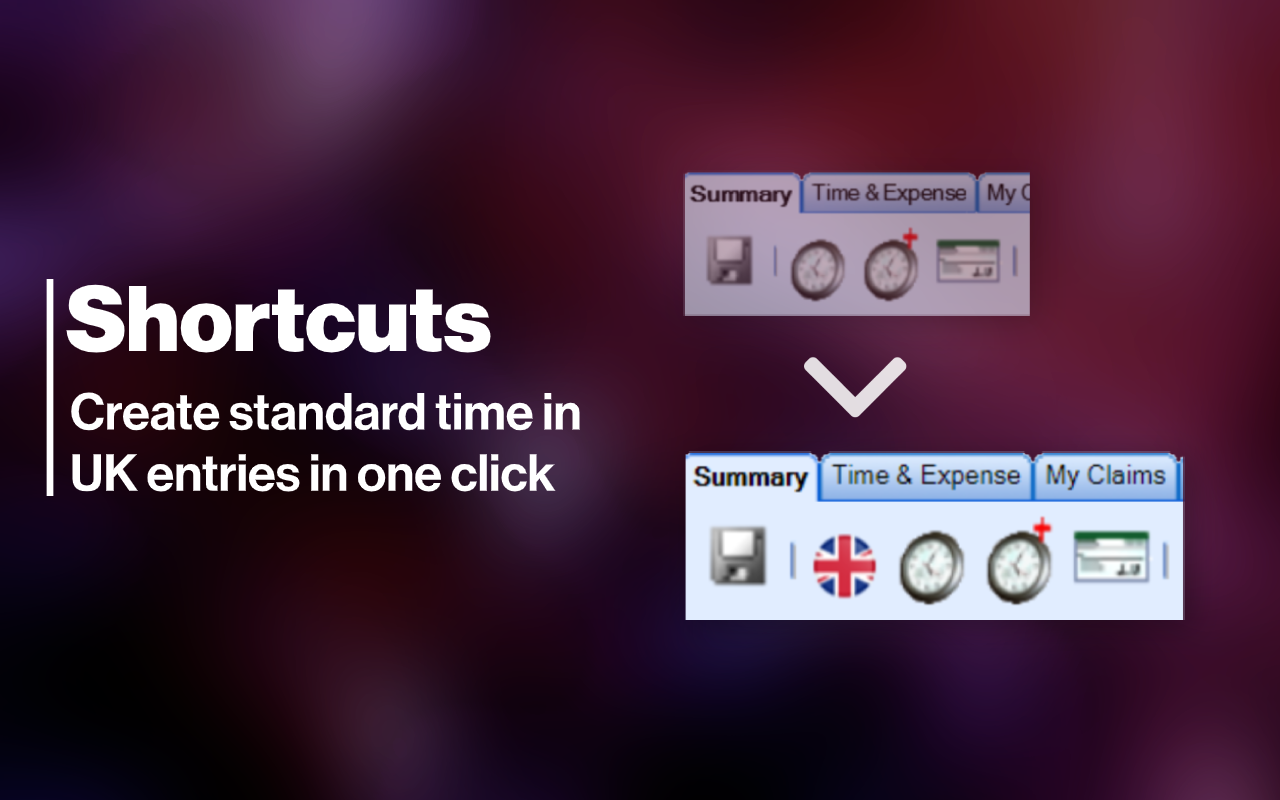
<style>
.page{position:relative;width:1280px;height:800px}
.page>*{position:absolute;margin:0}
.t1{font:91px "NeueHaasDisplay-Black";color:#ffffff}
.t2{font:51px "NeueHaasDisplay-Mediu";color:#ffffff}
</style>
<div class="page">
<p class="t1" style="left:66px;top:284px;width:425px;height:69px">Shortcuts</p>
<p class="t2" style="left:71px;top:392px;width:509px;height:100px">Create standard time in<br>UK entries in one click</p>
</div>
